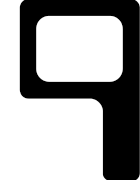
<style>
.page{position:relative;width:140px;height:180px;background:#ffffff}
.page>*{position:absolute;margin:0}
.t1{font:398.3px "MICREncoding";color:#000000}
</style>
<div class="page">
<p class="t1" style="left:19px;top:0px;width:121px;height:182px">9</p>
</div>
